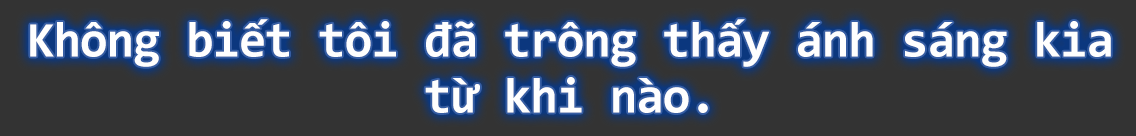
<style>
.page{position:relative;width:1136px;height:136px;background:#333333}
.page>*{position:absolute;margin:0}
.t1{font:50px/48px "Consolas-Bold";letter-spacing:-0.02em;color:#fefefe}
</style>
<div class="page">
<p class="t1" style="left:30px;top:19px;width:1081px;height:94px;text-align:center">Không biết tôi đã trông thấy ánh sáng kia<br>từ khi nào.</p>
</div>
